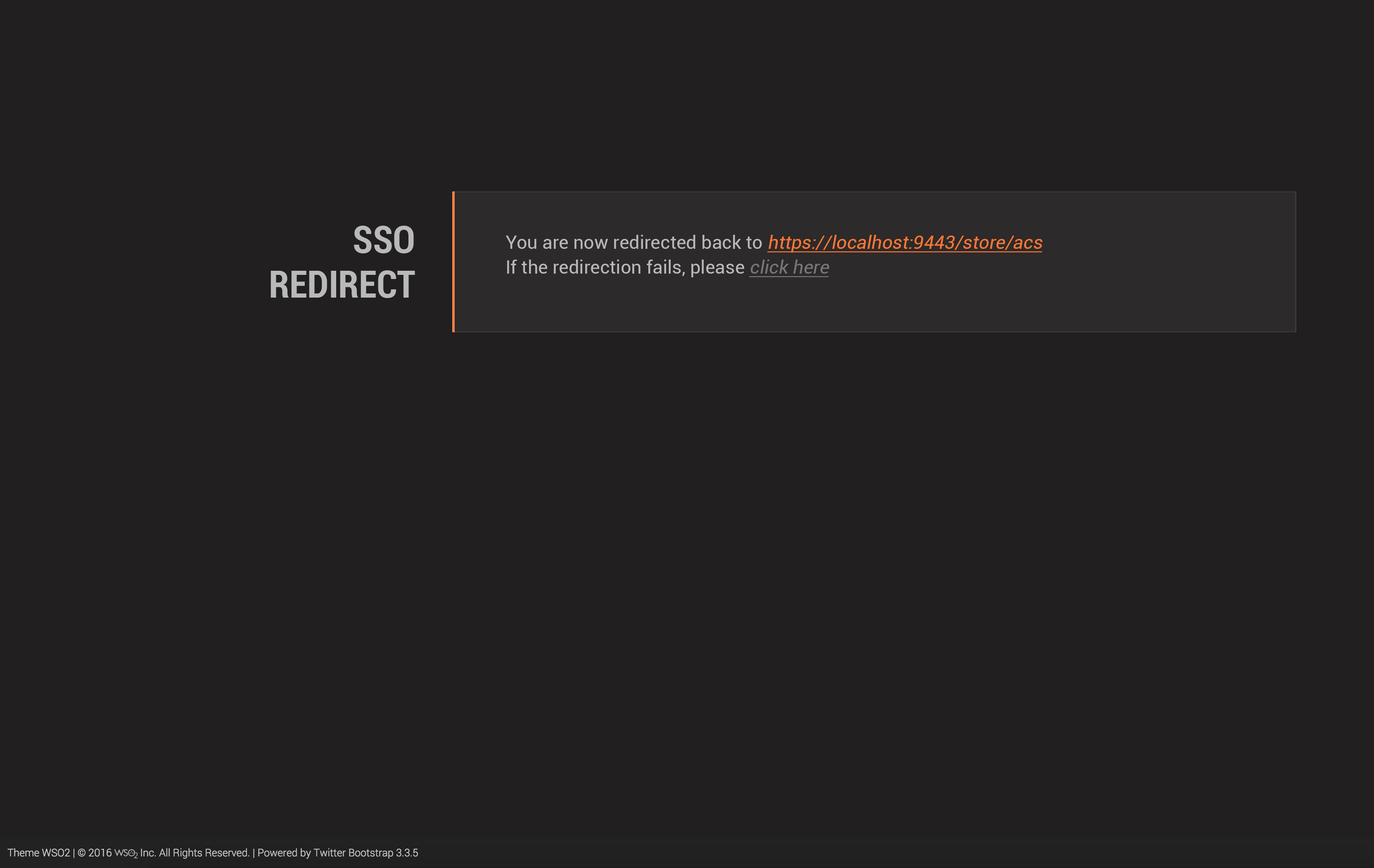
<style>
.page{position:relative;width:1374px;height:868px;background:#211f1f}
.page>*{position:absolute;margin:0}
.t1{font:37.1px "Roboto-BoldCondensed";color:#b9b9b9;text-transform:uppercase}
.t2{font:18.6px/24.8px "Roboto-Regular";color:#ff7736;font-style:italic;text-decoration:underline}
.t3{font:18.6px/24.8px "Roboto-Regular";color:#b9b9b9}
.t4{font:18.6px/24.8px "Roboto-Regular";color:#777777;font-style:italic;text-decoration:underline}
</style>
<div class="page">
<p class="t1" style="left:271px;top:226px;width:144px;height:72px;text-align:right">SSO<br>redirect</p>
<p class="t2" style="left:506px;top:235px;width:537px;height:42px"><span class="t3">You are now redirected back to </span>https://localhost:9443/store/acs <br><span class="t3">If the redirection fails, please </span><span class="t4">click here</span></p>
</div>
